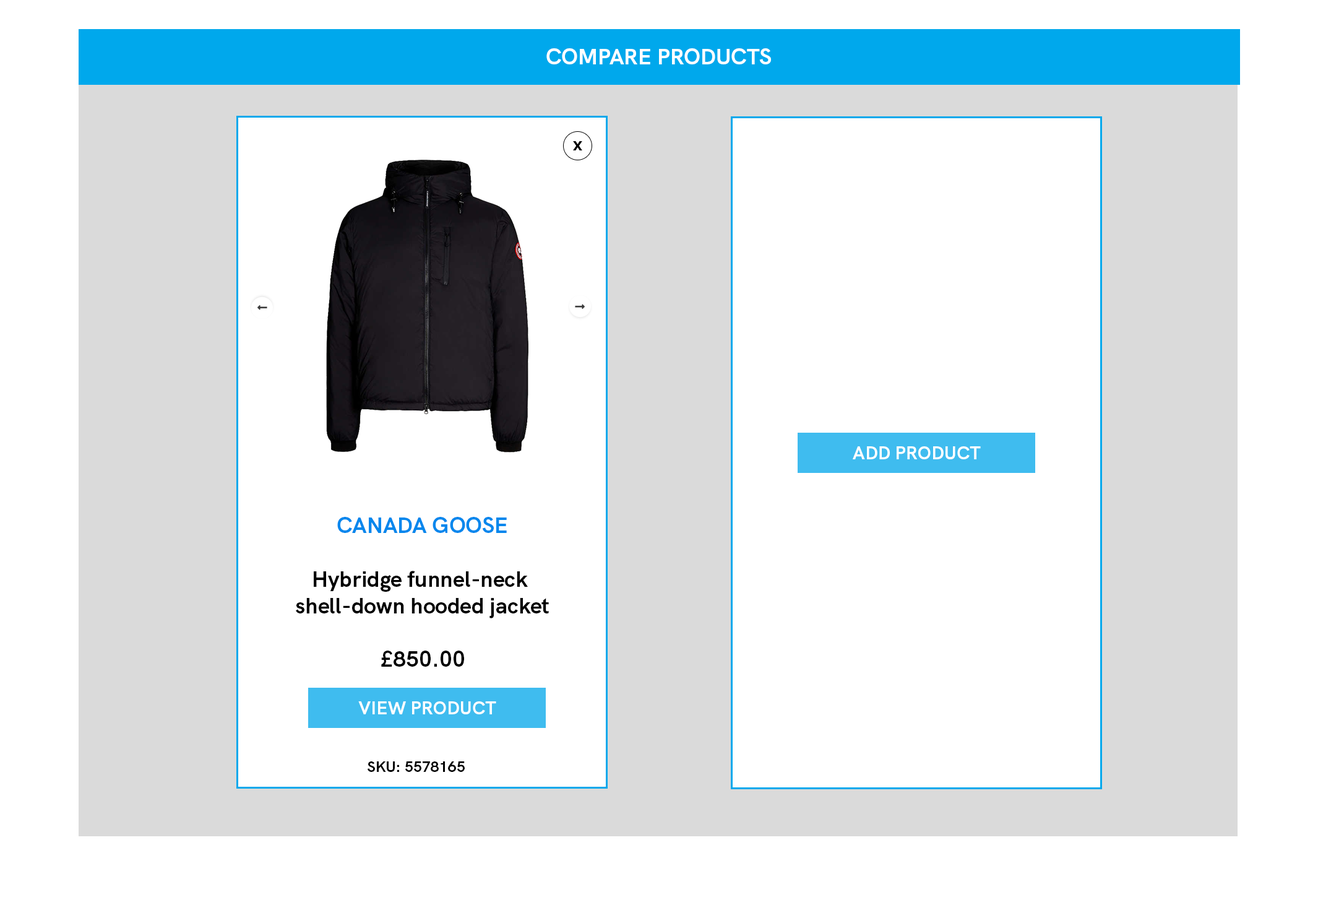
<style>
.page{position:relative;width:1318px;height:905px;background:#ffffff}
.page>*{position:absolute;margin:0}
.t1{font:22.3px "HKGrotesk-Bold";color:#ffffff}
.t2{font:18.6px "HKGrotesk-Bold";color:#ffffff}
.t3{font:22.3px "HKGrotesk-Bold";color:#000000}
.t4{font:22.3px "HKGrotesk-Bold";color:#0287ed}
.t5{font:14.9px "HKGrotesk-Bold";color:#000000}
</style>
<div class="page">
<p class="t1" style="left:546px;top:48px;width:225px;height:16px">COMPARE PRODUCTS</p>
<p class="t2" style="left:853px;top:446px;width:128px;height:13px">ADD PRODUCT</p>
<p class="t3" style="left:296px;top:517px;width:253px;height:149px;text-align:center"><span class="t4">CANADA GOOSE<br><br></span>Hybridge funnel-neck <br>shell-down hooded jacket<br><br>£850.00</p>
<p class="t2" style="left:358px;top:701px;width:138px;height:13px">VIEW PRODUCT</p>
<p class="t5" style="left:368px;top:761px;width:97px;height:11px">SKU: 5578165</p>
</div>
